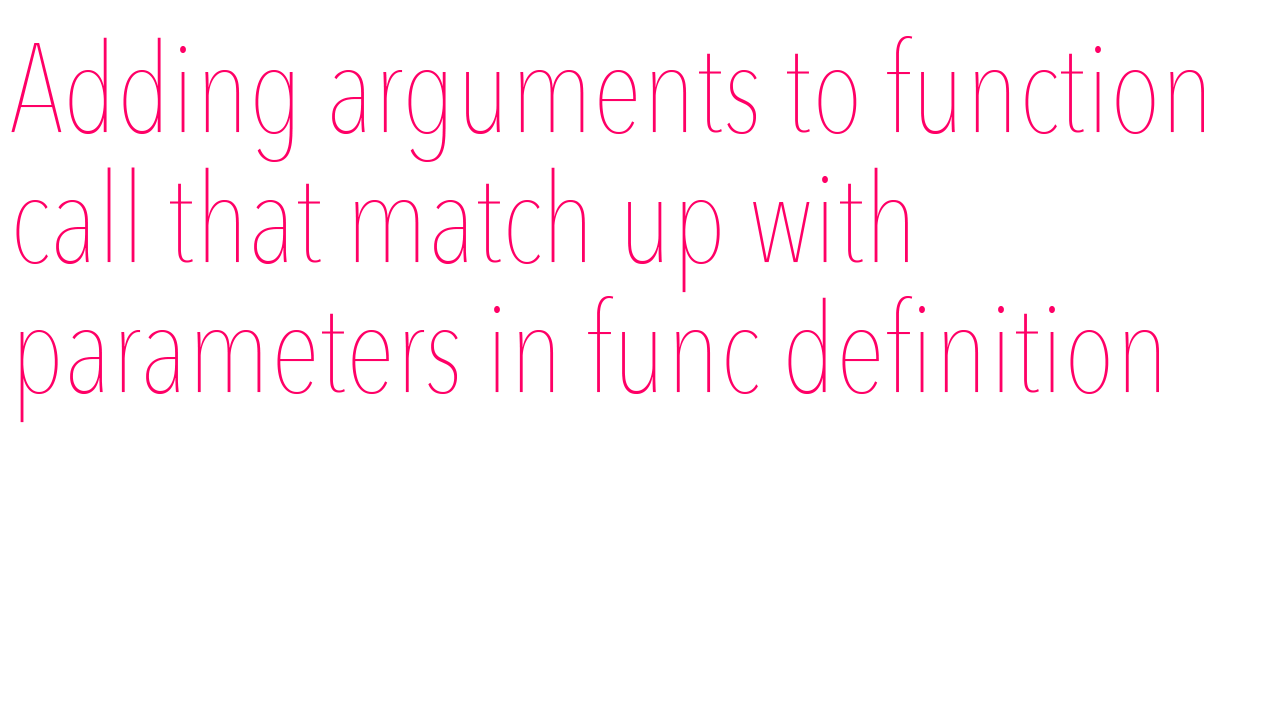
<style>
.page{position:relative;width:1280px;height:720px;background:#ffffff}
.page>*{position:absolute;margin:0}
.t1{font:125px "AvenirNextCondensed-UltraLight";color:#ff0066}
</style>
<div class="page">
<p class="t1" style="left:11px;top:36px;width:1193px;height:387px">Adding arguments to function <br>call that match up with <br>parameters in func definition</p>
</div>
